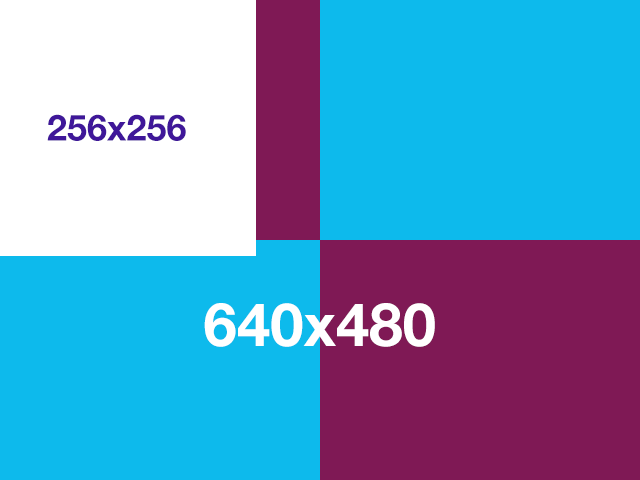
<style>
.page{position:relative;width:640px;height:480px;background:#0dbaec}
.page>*{position:absolute;margin:0}
.t1{font:36px "HelveticaNeue-Bold";color:#3f1799}
.t2{font:60px "HelveticaNeue-Bold";color:#ffffff}
</style>
<div class="page">
<p class="t1" style="left:47px;top:114px;width:139px;height:27px">256x256</p>
<p class="t2" style="left:204px;top:303px;width:231px;height:44px">640x480</p>
</div>
